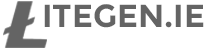
<style>
.page{position:relative;width:204px;height:49px;background:#ffffff}
.page>*{position:absolute;margin:0}
.t1{font:32px "Montserrat-Bold";color:#646464}
</style>
<div class="page">
<p class="t1" style="left:44px;top:4px;width:160px;height:24px">ITEGEN.IE</p>
</div>
